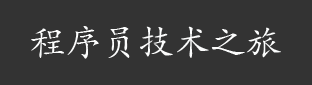
<style>
.page{position:relative;width:312px;height:85px;background:#333333}
.page>*{position:absolute;margin:0}
.t1{font:36px "STKaiti";color:#fcfdfd}
</style>
<div class="page">
<p class="t1" style="left:31px;top:26px;width:250px;height:33px">程序员技术之旅</p>
</div>
